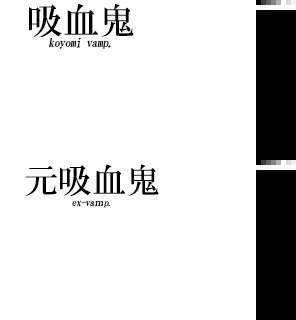
<style>
.page{position:relative;width:296px;height:320px;background:#ffffff}
.page>*{position:absolute;margin:0}
.t1{font:12px/14px "HGMinchoB";letter-spacing:-0.05em;color:#000000;font-style:italic}
.t2{font:36px/14px "HGMinchoB";color:#000000}
.t3{font:12px/12px "HGMinchoB";letter-spacing:-0.05em;color:#000000;font-style:italic}
.t4{font:10px/10px "HGMinchoB";letter-spacing:-0.05em;color:#000000;font-style:italic}
.t5{font:34px/10px "HGMinchoB";color:#000000}
.t6{font:9px/10px "HGMinchoB";letter-spacing:-0.05em;color:#000000;font-style:italic;scale:1.11 1}
.t7{font:10px/14px "HGMinchoB";letter-spacing:-0.05em;color:#000000;font-style:italic;scale:0.9 1}
</style>
<div class="page">
<p class="t1" style="left:29px;top:3px;width:105px;height:46px;text-align:center"><span class="t2">吸血鬼<br></span>koyomi vamp<span class="t3">.</span></p>
<p class="t4" style="left:25px;top:164px;width:134px;height:44px;text-align:center"><span class="t5">元吸血鬼<br></span>ex-vaｍ<span class="t6">p</span><span class="t7">.</span></p>
</div>
